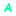
<style>
.page{position:relative;width:16px;height:16px;background:#ffffff}
.page>*{position:absolute;margin:0}
.t1{font:12px "ComicSansMS-Bold";color:#02ffb5}
</style>
<div class="page">
<p class="t1" style="left:4px;top:3px;width:8px;height:9px">A</p>
</div>
